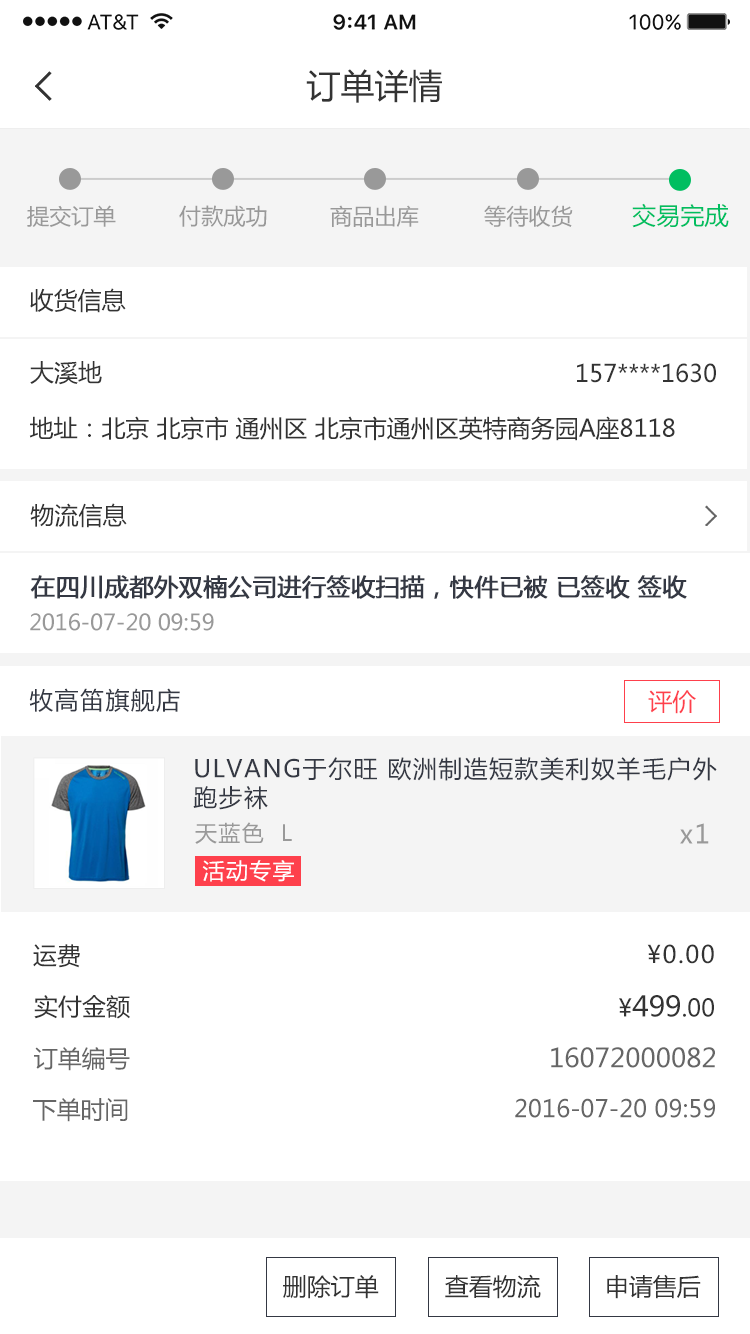
<style>
.page{position:relative;width:750px;height:1334px;background:#ffffff}
.page>*{position:absolute;margin:0}
.t1{font:34px "MicrosoftYaHei";color:#333333}
.t2{font:22px "MicrosoftYaHei";color:#999999}
.t3{font:24px "MicrosoftYaHei";color:#00be60}
.t4{font:24px "MicrosoftYaHei";color:#333333}
.t5{font:24px "MicrosoftYaHei";color:#343843;font-weight:bold}
.t6{font:24px "MicrosoftYaHei";letter-spacing:0.06em;color:#343843}
.t7{font:24px "MicrosoftYaHei";color:#fe404c}
.t8{font:22px "MicrosoftYaHei";letter-spacing:0.06em;color:#999999}
.t9{font:26px "MicrosoftYaHei";letter-spacing:0.06em;color:#999999}
.t10{font:22px "MicrosoftYaHei";letter-spacing:0.06em;color:#ffffff}
.t11{font:24px "MicrosoftYaHei";letter-spacing:0.06em;color:#333333}
.t12{font:28px "MicrosoftYaHei";color:#333333}
.t13{font:24px "MicrosoftYaHei";color:#666666}
.t14{font:26px "MicrosoftYaHei";color:#666666}
</style>
<div class="page">
<p class="t1" style="left:306px;top:69px;width:136px;height:34px">订单详情</p>
<p class="t2" style="left:27px;top:205px;width:89px;height:22px">提交订单</p>
<p class="t2" style="left:179px;top:205px;width:88px;height:22px">付款成功</p>
<p class="t2" style="left:330px;top:205px;width:89px;height:22px">商品出库</p>
<p class="t2" style="left:484px;top:205px;width:89px;height:22px">等待收货</p>
<p class="t3" style="left:632px;top:203px;width:97px;height:25px">交易完成</p>
<p class="t4" style="left:30px;top:288px;width:96px;height:25px">收货信息</p>
<p class="t4" style="left:30px;top:361px;width:72px;height:24px">大溪地</p>
<p class="t4" style="left:577px;top:363px;width:139px;height:20px">157****1630</p>
<p class="t4" style="left:29px;top:416px;width:646px;height:25px">地址：北京 北京市 通州区 北京市通州区英特商务园A座8118</p>
<p class="t4" style="left:30px;top:503px;width:97px;height:25px">物流信息</p>
<p class="t5" style="left:30px;top:575px;width:657px;height:24px">在四川成都外双楠公司进行签收扫描，快件已被 已签收 签收</p>
<p class="t2" style="left:30px;top:613px;width:184px;height:18px">2016-07-20 09:59</p>
<p class="t6" style="left:29px;top:688px;width:151px;height:24px">牧高笛旗舰店</p>
<p class="t7" style="left:648px;top:690px;width:48px;height:24px">评价</p>
<p class="t6" style="left:193px;top:757px;width:524px;height:53px">ULVANG于尔旺 欧洲制造短款美利奴羊毛户外跑步袜</p>
<p class="t8" style="left:195px;top:822px;width:97px;height:22px">天蓝色  L</p>
<p class="t9" style="left:680px;top:823px;width:29px;height:21px">x1</p>
<p class="t10" style="left:202px;top:860px;width:92px;height:22px">活动专享</p>
<p class="t4" style="left:33px;top:944px;width:47px;height:24px">运费</p>
<p class="t11" style="left:647px;top:944px;width:67px;height:20px">¥0.00</p>
<p class="t4" style="left:34px;top:995px;width:96px;height:24px">实付金额</p>
<p class="t12" style="left:619px;top:995px;width:95px;height:22px"><span class="t4">¥</span>499<span class="t4">.00</span></p>
<p class="t13" style="left:34px;top:1047px;width:96px;height:24px">订单编号</p>
<p class="t14" style="left:551px;top:1047px;width:164px;height:21px">16072000082</p>
<p class="t13" style="left:33px;top:1098px;width:95px;height:24px">下单时间</p>
<p class="t13" style="left:515px;top:1098px;width:200px;height:20px">2016-07-20 09:59</p>
<p class="t4" style="left:283px;top:1275px;width:96px;height:24px">删除订单</p>
<p class="t4" style="left:445px;top:1274px;width:96px;height:25px">查看物流</p>
<p class="t4" style="left:607px;top:1274px;width:94px;height:25px">申请售后</p>
</div>
